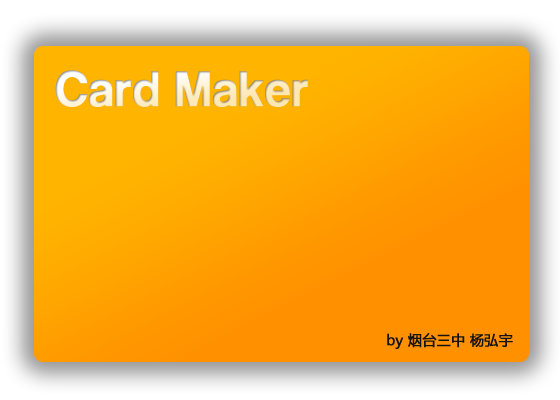
<style>
.page{position:relative;width:560px;height:400px}
.page>*{position:absolute;margin:0}
.t1{font:48px "Coolvetica";font-weight:bold}
.t2{font:14px "MicrosoftYaHei";color:#141414;font-weight:bold}
</style>
<div class="page">
<p class="t1" style="left:55px;top:70px;width:253px;height:37px">Card Maker</p>
<p class="t2" style="left:387px;top:333px;width:126px;height:16px">by 烟台三中 杨弘宇</p>
</div>
